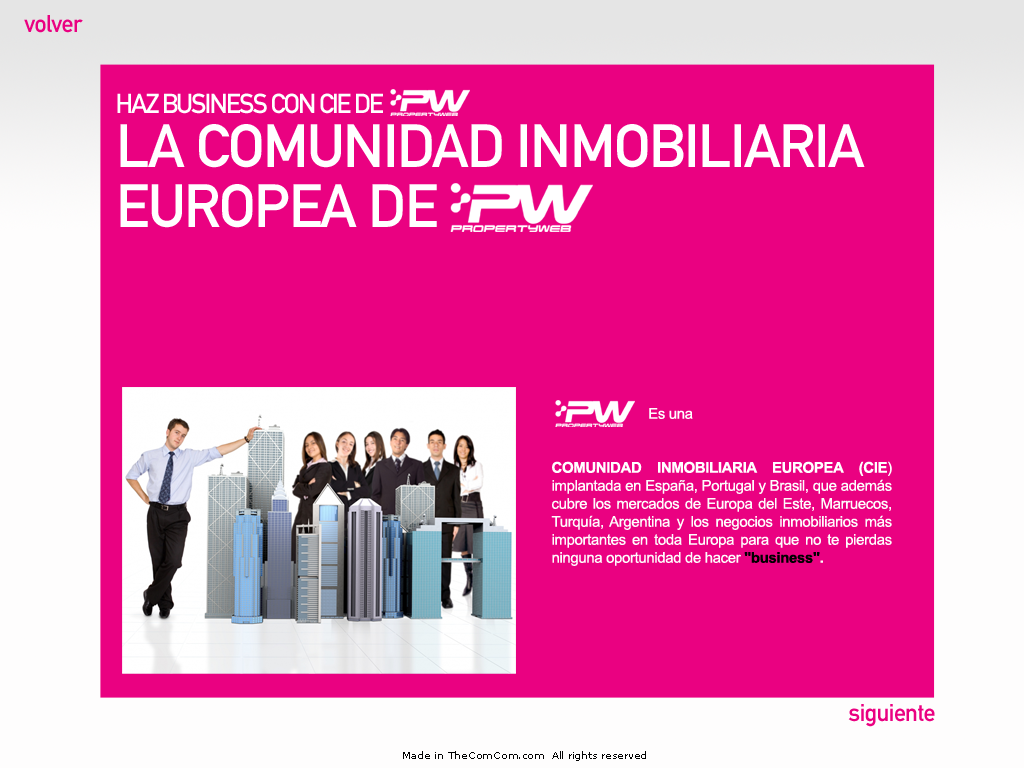
<style>
.page{position:relative;width:1024px;height:768px;background:#ea0181}
.page>*{position:absolute;margin:0}
.t1{font:24px "DINMittelschriftStd";letter-spacing:-0.025em;color:#ea0181}
.t2{font:27px "DINMittelschriftStd";letter-spacing:-0.075em;color:#ffffff;text-transform:uppercase}
.t3{font:60px/60px "DINMittelschriftStd";letter-spacing:-0.025em;color:#ffffff;text-transform:uppercase}
.t4{font:15px "ArialMT";letter-spacing:-0.025em;color:#fefcfc}
.t5{font:15px "ArialMT";letter-spacing:-0.025em;color:#ffffff}
.t6{font:15px "Arial-BoldMT";letter-spacing:-0.025em;color:#ffffff;text-transform:uppercase}
.t7{font:15px "Arial-BoldMT";letter-spacing:-0.025em;color:#ffffff}
.t8{font:15px "Arial-BoldMT";letter-spacing:-0.025em;color:#000000}
.t9{font:15px "Arial-BoldMT";letter-spacing:-0.025em;color:#fefcfc}
.t10{font:10px "MSReferenceSansSerif";letter-spacing:-0.025em;color:#010101}
</style>
<div class="page">
<p class="t1" style="left:24px;top:15px;width:59px;height:18px">volver</p>
<p class="t2" style="left:117px;top:93px;width:266px;height:21px">HAZ BUSINESS CON CIE de</p>
<p class="t3" style="left:120px;top:124px;width:745px;height:104px">La Comunidad Inmobiliaria Europea de</p>
<p class="t4" style="left:551px;top:408px;width:341px;height:158px;text-align:justify"><span class="t5"><br><br>  <br>                 Es una<br></span><span class="t6"><br><br>Comunidad Inmobiliaria Europea</span><span class="t7"> (CIE</span><span class="t5">) </span>implantada en España, Portugal y Brasil, que además cubre los mercados de Europa del Este, Marruecos, Turquía, Argentina y los negocios inmobiliarios más importantes en toda Europa para que no te pierdas ninguna oportunidad de hacer <span class="t8">"business"</span><span class="t9">.</span></p>
<p class="t1" style="left:848px;top:704px;width:87px;height:23px">siguiente</p>
<p class="t10" style="left:403px;top:751px;width:243px;height:10px">Made in TheComCom.com  All rights reserved</p>
</div>
